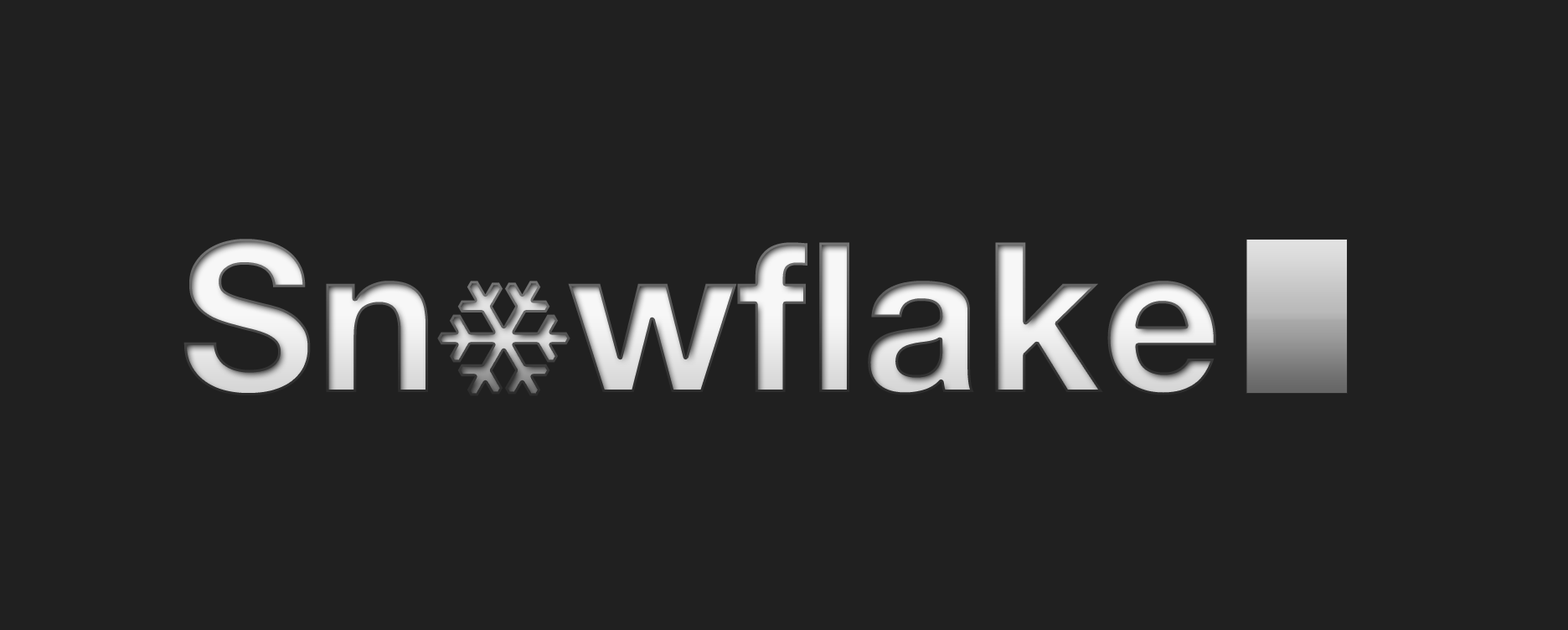
<style>
.page{position:relative;width:1568px;height:630px;background:#202020}
.page>*{position:absolute;margin:0}
.t1{font:209.4px "HelveticaNeue-Bold"}
</style>
<div class="page">
<p class="t1" style="left:183px;top:239px;width:1033px;height:156px">Snowflake</p>
</div>
